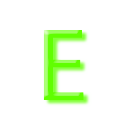
<style>
.page{position:relative;width:128px;height:128px;background:#ffffff}
.page>*{position:absolute;margin:0}
.t1{font:104px "MyriadPro-Regular";letter-spacing:-0.01em;color:#5fff00}
</style>
<div class="page">
<p class="t1" style="left:43px;top:30px;width:41px;height:70px">E</p>
</div>
